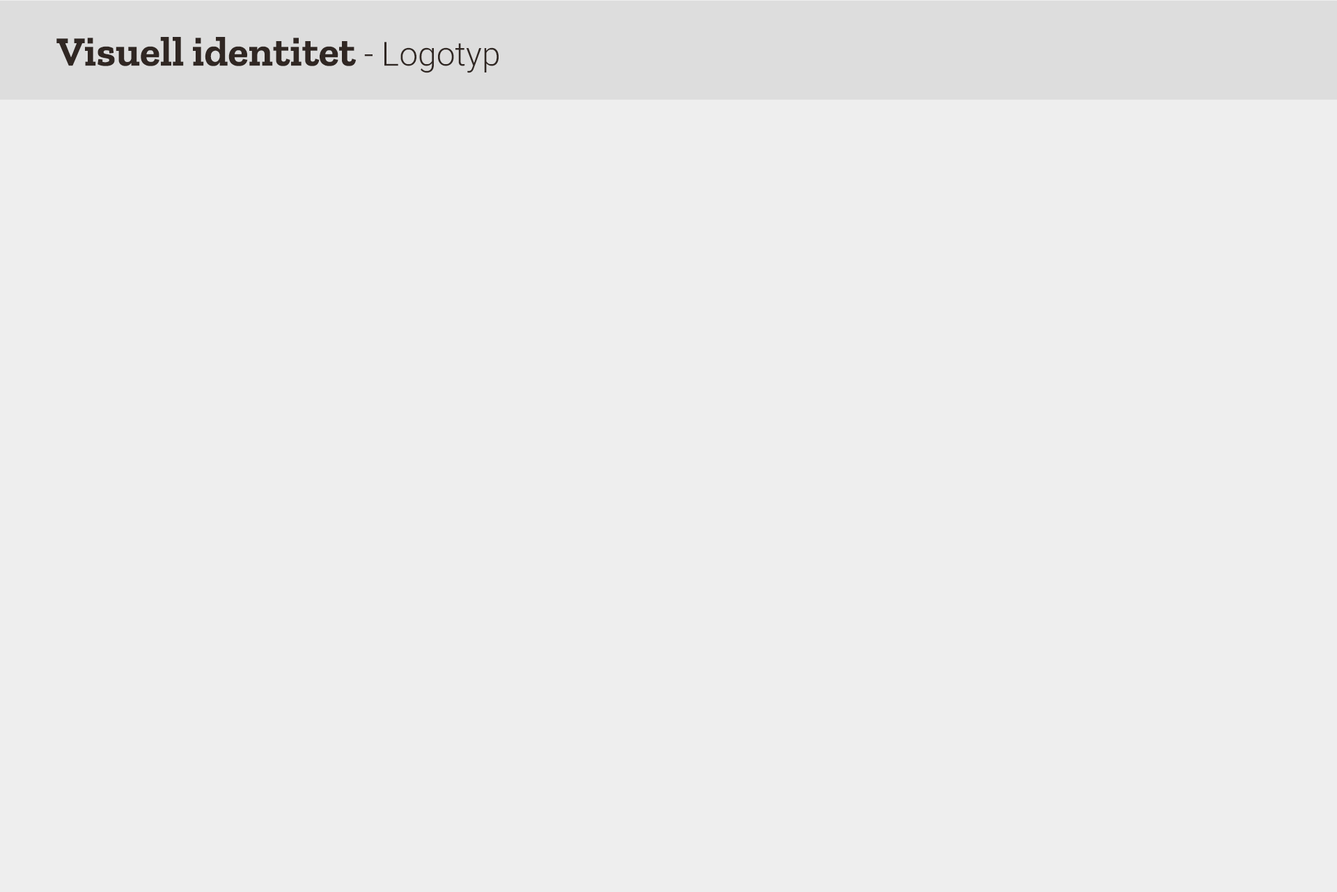
<style>
.page{position:relative;width:1337px;height:892px;background:#eeeeee}
.page>*{position:absolute;margin:0}
.t1{font:41.8px "ZillaSlab-Bold";color:#302723}
.t2{font:33.4px "Heebo-Light";color:#302723}
</style>
<div class="page">
<p class="t1" style="left:56px;top:37px;width:443px;height:36px">Visuell identitet<span class="t2"> - Logotyp</span></p>
</div>
